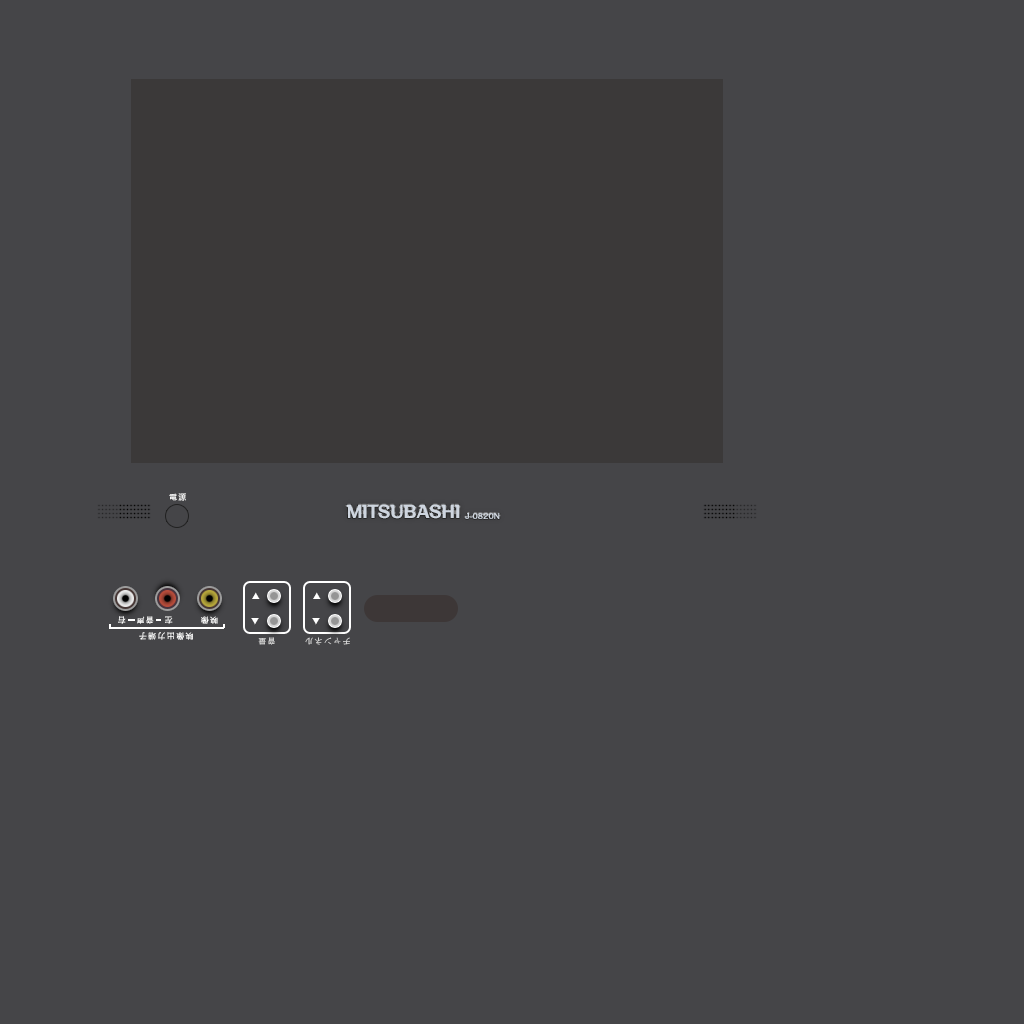
<style>
.page{position:relative;width:1024px;height:1024px;background:#454548}
.page>*{position:absolute;margin:0}
.t1{font:8px "KakuminPro-Medium";letter-spacing:0.17em;color:#ffffff;text-transform:uppercase}
.t2{font:17.1px "KakuminPro-Heavy";letter-spacing:-0.05em;color:#ced5df;text-transform:uppercase}
.t3{font:7.5px "KakuminPro-Heavy";letter-spacing:-0.05em;color:#ced5df;text-transform:uppercase}
.t4{font:8px "KozGoPr6N-Regular";letter-spacing:0.17em;color:#ffffff;text-transform:uppercase}
.t5{font:8px "KakuminPro-Medium";letter-spacing:0.17em;color:#d6d6d6;text-transform:uppercase}
</style>
<div class="page">
<p class="t1" style="left:169px;top:493px;width:17px;height:8px">電源</p>
<p class="t2" style="left:346px;top:504px;width:114px;height:15px">mitsubashi</p>
<p class="t3" style="left:465px;top:513px;width:35px;height:6px">J-0820N</p>
<p class="t4" style="left:252px;top:592px;width:8px;height:7px">▲</p>
<p class="t4" style="left:313px;top:592px;width:8px;height:7px">▲</p>
<p class="t1" style="left:118px;top:616px;width:100px;height:8px;rotate:180deg">映像　　  左　音声　右</p>
<p class="t4" style="left:251px;top:618px;width:8px;height:7px;rotate:180deg">▲</p>
<p class="t4" style="left:312px;top:618px;width:8px;height:7px;rotate:180deg">▲</p>
<p class="t1" style="left:139px;top:632px;width:54px;height:8px;rotate:180deg">映像出力端子</p>
<p class="t5" style="left:258px;top:637px;width:92px;height:8px;rotate:180deg">チャンネル　　　音量</p>
</div>
